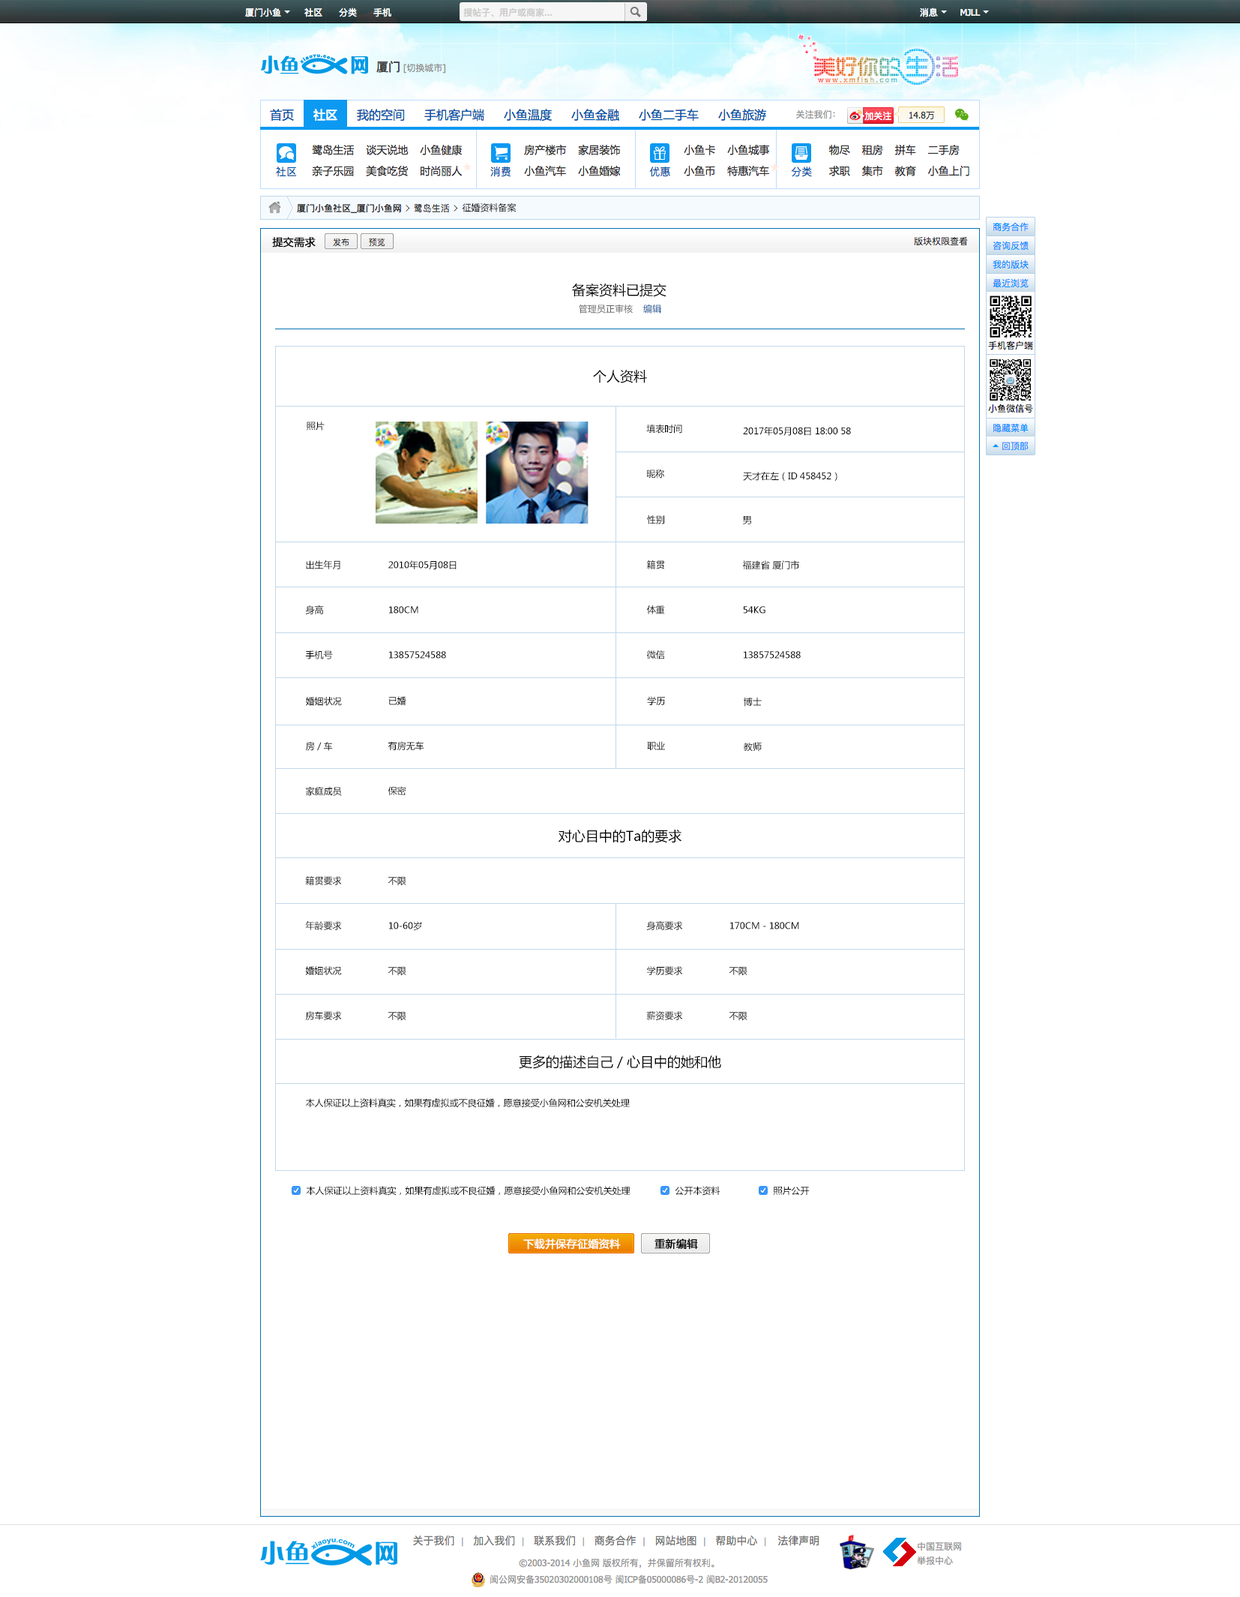
<style>
.page{position:relative;width:1240px;height:1597px;background:#ffffff}
.page>*{position:absolute;margin:0}
.t1{font:9px "MicrosoftYaHei";color:#000000}
.t2{font:10.5px "MicrosoftYaHei";color:#000000;font-weight:bold}
.t3{font:13.5px "MicrosoftYaHei";color:#000000}
.t4{font:9px "MicrosoftYaHei";color:#666666}
.t5{font:9px "MicrosoftYaHei";color:#014c90}
.t6{font:9px/45px "MicrosoftYaHei";color:#000000}
.t7{font:10.5px "MicrosoftYaHei";color:#ffffff;font-weight:bold}
</style>
<div class="page">
<p class="t1" style="left:462px;top:202px;width:55px;height:10px">征婚资料备案</p>
<p class="t2" style="left:272px;top:237px;width:44px;height:11px">提交需求</p>
<p class="t3" style="left:572px;top:283px;width:95px;height:14px">备案资料已提交</p>
<p class="t4" style="left:579px;top:304px;width:83px;height:10px">管理员正审核    <span class="t5">编辑</span></p>
<p class="t3" style="left:593px;top:369px;width:54px;height:14px">个人资料</p>
<p class="t1" style="left:307px;top:422px;width:18px;height:8px">照片</p>
<p class="t6" style="left:646px;top:424px;width:36px;height:54px">填表时间<br>昵称</p>
<p class="t6" style="left:743px;top:426px;width:108px;height:55px">2017年05月08日 18:00 58<br>天才在左（ID 458452）</p>
<p class="t6" style="left:646px;top:515px;width:19px;height:144px">性别<br>籍贯<br>体重<br>微信</p>
<p class="t6" style="left:742px;top:516px;width:59px;height:142px">男<br>福建省 厦门市<br>54KG<br>13857524588</p>
<p class="t6" style="left:305px;top:560px;width:35px;height:99px">出生年月<br>身高<br>手机号</p>
<p class="t6" style="left:388px;top:560px;width:69px;height:98px">2010年05月08日<br>180CM<br>13857524588</p>
<p class="t6" style="left:306px;top:697px;width:36px;height:99px">婚姻状况<br>房／车<br>家庭成员</p>
<p class="t6" style="left:388px;top:696px;width:36px;height:100px">已婚<br>有房无车<br>保密</p>
<p class="t6" style="left:647px;top:696px;width:18px;height:54px">学历<br>职业</p>
<p class="t6" style="left:744px;top:697px;width:18px;height:55px">博士<br>教师</p>
<p class="t3" style="left:559px;top:830px;width:123px;height:13px">对心目中的Ta的要求</p>
<p class="t6" style="left:305px;top:876px;width:37px;height:144px">籍贯要求<br>年龄要求<br>婚姻状况<br>房车要求</p>
<p class="t6" style="left:388px;top:877px;width:34px;height:144px">不限<br>10-60岁<br>不限<br>不限</p>
<p class="t6" style="left:646px;top:921px;width:37px;height:99px">身高要求<br>学历要求<br>薪资要求</p>
<p class="t6" style="left:729px;top:922px;width:71px;height:99px">170CM－180CM<br>不限<br>不限</p>
<p class="t3" style="left:519px;top:1055px;width:203px;height:14px">更多的描述自己／心目中的她和他</p>
<p class="t1" style="left:306px;top:1098px;width:324px;height:10px">本人保证以上资料真实，如果有虚拟或不良征婚，愿意接受小鱼网和公安机关处理</p>
<p class="t1" style="left:306px;top:1186px;width:325px;height:10px">本人保证以上资料真实，如果有虚拟或不良征婚，愿意接受小鱼网和公安机关处理</p>
<p class="t1" style="left:675px;top:1186px;width:46px;height:10px">公开本资料</p>
<p class="t1" style="left:773px;top:1186px;width:37px;height:10px">照片公开</p>
<p class="t7" style="left:524px;top:1238px;width:97px;height:12px">下载并保存征婚资料</p>
<p class="t2" style="left:655px;top:1238px;width:43px;height:11px">重新编辑</p>
</div>
